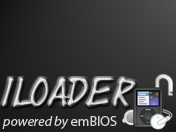
<style>
.page{position:relative;width:176px;height:132px}
.page>*{position:absolute;margin:0}
.t1{font:30px "Yearsupplyoffairycakes"}
.t2{font:14px "MyriadPro-It";color:#d8d8d8}
.t3{font:14px "MyriadPro-Regular";color:#d8d8d8}
</style>
<div class="page">
<p class="t1" style="left:2px;top:78px;width:134px;height:29px">iLoader</p>
<p class="t2" style="left:2px;top:116px;width:115px;height:13px">powered by<span class="t3"> emBIOS</span></p>
</div>
